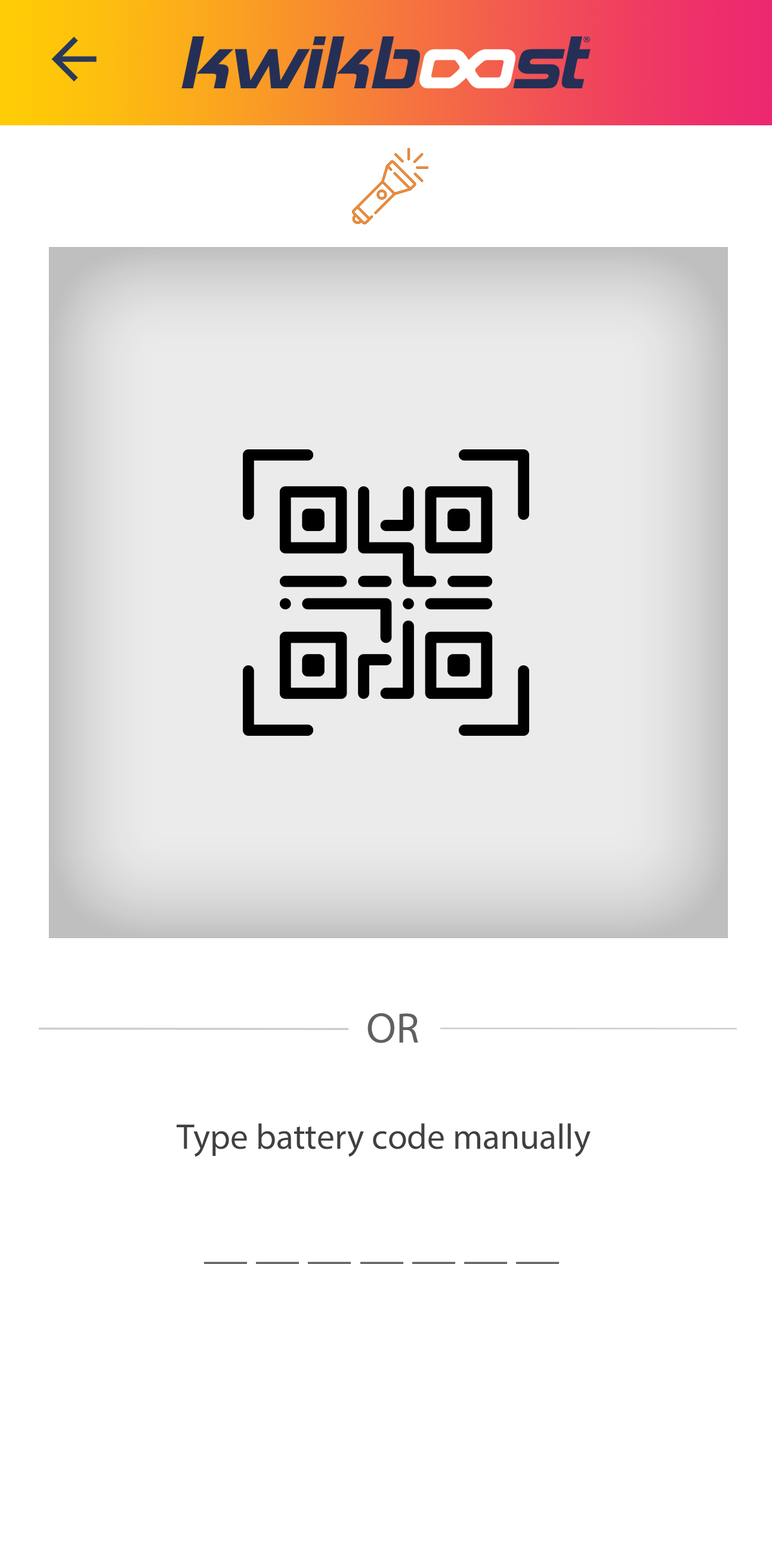
<style>
.page{position:relative;width:772px;height:1545px;background:#ffffff}
.page>*{position:absolute;margin:0}
.t1{font:43px "MyriadPro-Regular";color:#606060}
.t2{font:35.8px "MyriadPro-Regular";color:#404040}
</style>
<div class="page">
<p class="t1" style="left:368px;top:1012px;width:50px;height:31px">OR</p>
<p class="t2" style="left:177px;top:1123px;width:414px;height:34px">Type battery code manually</p>
<p class="t1" style="left:204px;top:1261px;width:355px;height:3px">__ __ __ __ __ __ __</p>
</div>
